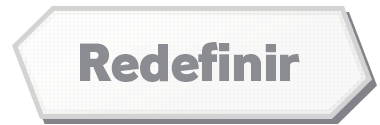
<style>
.page{position:relative;width:380px;height:125px}
.page>*{position:absolute;margin:0}
.t1{font:48px "RodinPro-UB";letter-spacing:-0.039em;color:#8b8c92}
</style>
<div class="page">
<p class="t1" style="left:80px;top:42px;width:220px;height:40px">Redefinir</p>
</div>
